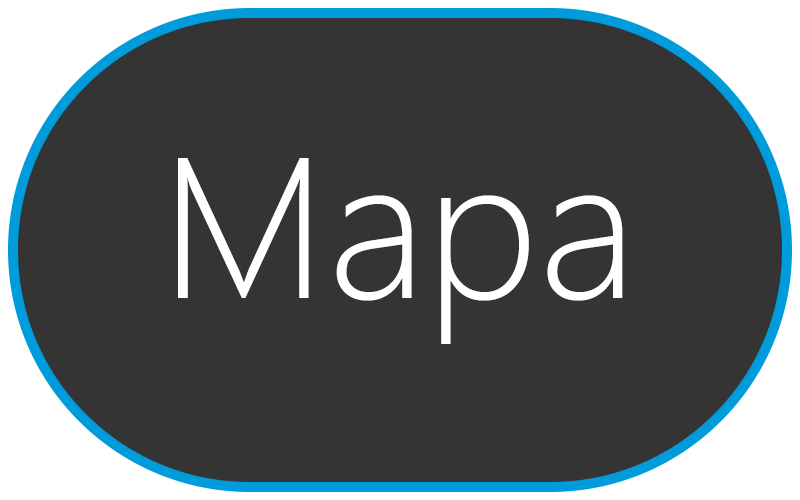
<style>
.page{position:relative;width:800px;height:500px;background:#343434}
.page>*{position:absolute;margin:0}
.t1{font:200px "SegoeUI-Light";color:#ffffff}
</style>
<div class="page">
<p class="t1" style="left:178px;top:158px;width:445px;height:186px">Mapa</p>
</div>
